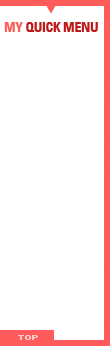
<style>
.page{position:relative;width:110px;height:346px;background:#ffffff}
.page>*{position:absolute;margin:0}
.t1{font:14px "YDIYGO330";letter-spacing:-0.05em;color:#ff5c5c;text-transform:uppercase}
.t2{font:14px "Univeconbol";letter-spacing:-0.025em;color:#bd1919;text-transform:uppercase}
.t3{font:14px "Univeconbol";letter-spacing:-0.025em;color:#ff5c5c;text-transform:uppercase}
.t4{font:8px "Sevenet7";color:#ffcaca;font-weight:bold}
</style>
<div class="page">
<p class="t1" style="left:45px;top:4px;width:12px;height:10px">▼</p>
<p class="t2" style="left:4px;top:22px;width:94px;height:10px"><span class="t3">my </span>quick menu</p>
<p class="t4" style="left:18px;top:335px;width:20px;height:5px">TOP</p>
</div>
